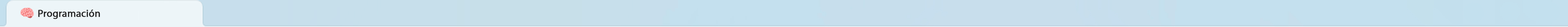
<style>
.page{position:relative;width:1568px;height:27px;background:#c4e0ee}
.page>*{position:absolute;margin:0}
.t1{font:10.2px "MyriadPro-Regular";color:#242424;font-weight:bold}
</style>
<div class="page">
<p class="t1" style="left:38px;top:10px;width:62px;height:9px">Programación</p>
</div>
